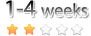
<style>
.page{position:relative;width:91px;height:36px;background:#ffffff}
.page>*{position:absolute;margin:0}
.t1{font:18px "MyriadPro-Regular"}
.t2{font:24px "MyriadPro-Regular"}
</style>
<div class="page">
<p class="t1" style="left:6px;top:0px;width:82px;height:17px"><span class="t2">1-4 </span>weeks</p>
</div>
